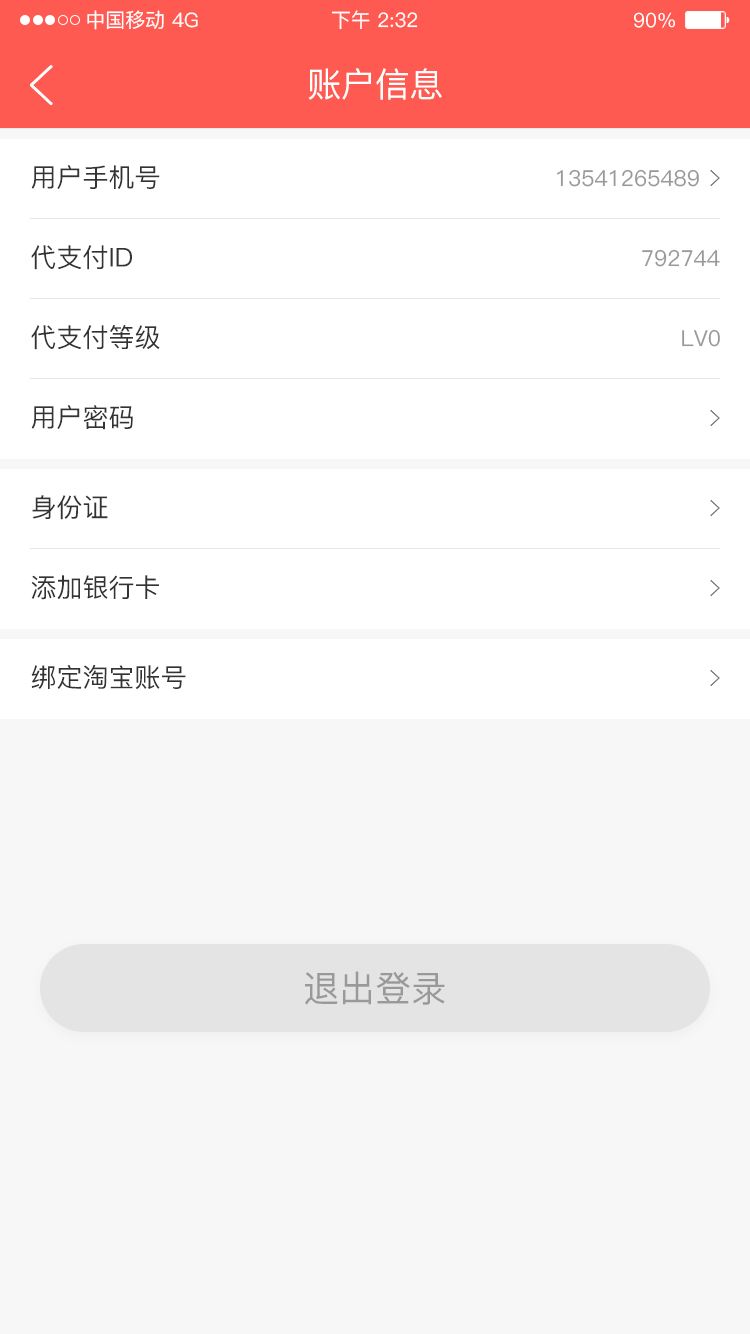
<style>
.page{position:relative;width:750px;height:1334px;background:#f7f7f7}
.page>*{position:absolute;margin:0}
.t1{font:20px "PingFang-SC-Medium";color:#ffffff}
.t2{font:34px "PingFang-SC-Medium";color:#ffffff}
.t3{font:26px "PingFang-SC-Medium";color:#333333}
.t4{font:22px "PingFang-SC-Medium";color:#999999}
.t5{font:36px "PingFang-SC-Medium";color:#999999}
</style>
<div class="page">
<p class="t1" style="left:87px;top:10px;width:77px;height:20px">中国移动</p>
<p class="t1" style="left:172px;top:12px;width:26px;height:16px">4G</p>
<p class="t1" style="left:331px;top:10px;width:87px;height:20px">下午 2:32</p>
<p class="t1" style="left:634px;top:12px;width:41px;height:16px">90%</p>
<p class="t2" style="left:308px;top:68px;width:134px;height:32px">账户信息</p>
<p class="t3" style="left:31px;top:165px;width:129px;height:24px">用户手机号</p>
<p class="t4" style="left:557px;top:169px;width:142px;height:18px">13541265489</p>
<p class="t3" style="left:31px;top:245px;width:101px;height:25px">代支付ID</p>
<p class="t4" style="left:642px;top:249px;width:78px;height:18px">792744</p>
<p class="t3" style="left:31px;top:325px;width:129px;height:25px">代支付等级</p>
<p class="t4" style="left:682px;top:329px;width:38px;height:18px">LV0</p>
<p class="t3" style="left:31px;top:405px;width:102px;height:25px">用户密码</p>
<p class="t3" style="left:32px;top:495px;width:76px;height:25px">身份证</p>
<p class="t3" style="left:31px;top:575px;width:128px;height:25px">添加银行卡</p>
<p class="t3" style="left:31px;top:664px;width:155px;height:26px">绑定淘宝账号</p>
<p class="t5" style="left:305px;top:971px;width:140px;height:34px">退出登录</p>
</div>
